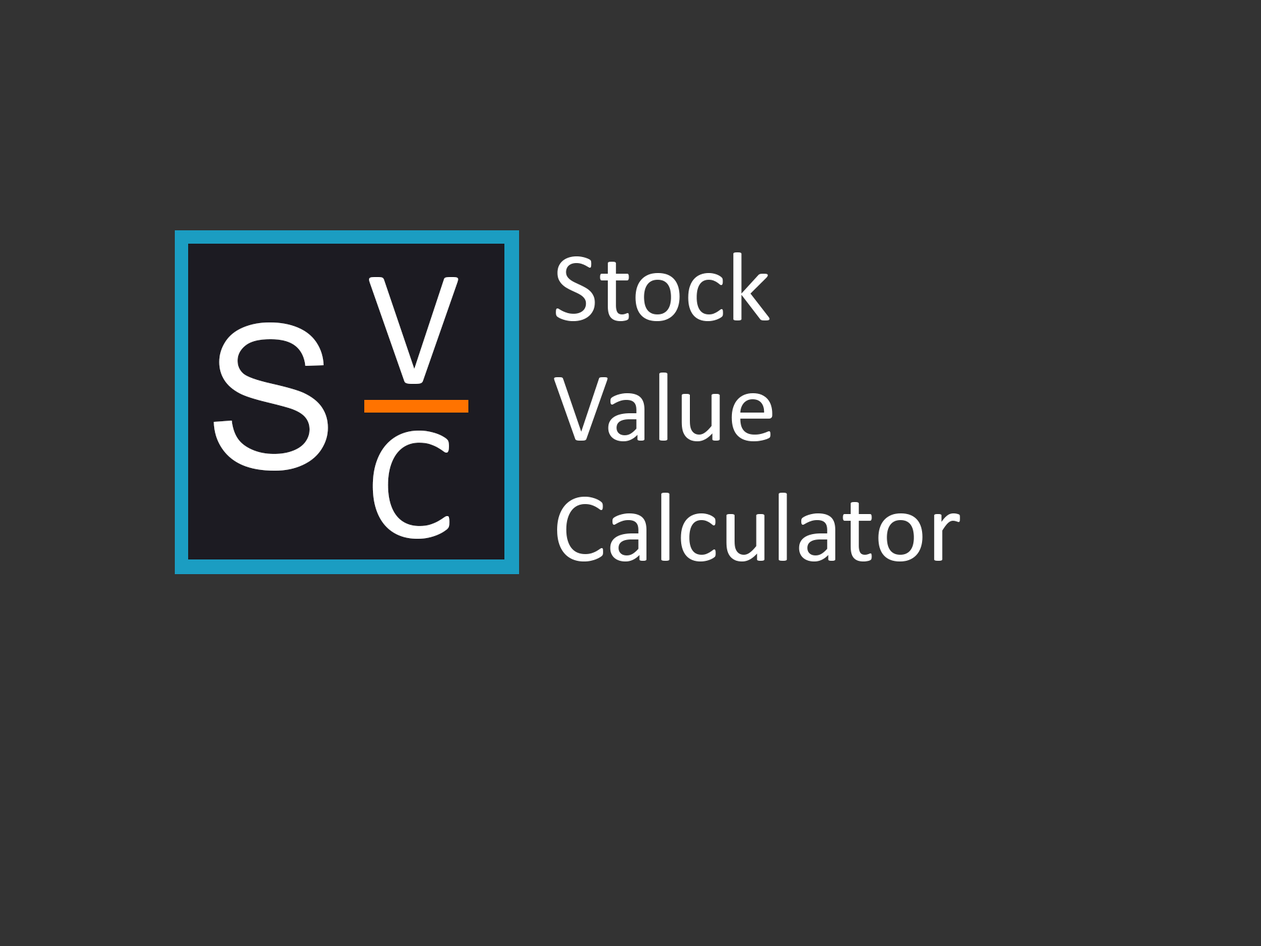
<style>
.page{position:relative;width:1261px;height:946px;background:#333333}
.page>*{position:absolute;margin:0}
.t1{font:100.1px "Calibri";color:#ffffff}
.t2{font:166.8px "Calibri";color:#ffffff}
.t3{font:200.2px "ArialMT";color:#ffffff}
</style>
<div class="page">
<p class="t1" style="left:554px;top:252px;width:406px;height:309px">Stock<br>Value<br>Calculator</p>
<p class="t2" style="left:369px;top:277px;width:89px;height:107px">V</p>
<p class="t3" style="left:214px;top:322px;width:114px;height:148px">S</p>
<p class="t2" style="left:372px;top:430px;width:78px;height:108px">C</p>
</div>
